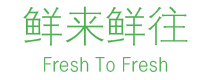
<style>
.page{position:relative;width:200px;height:80px;background:#ffffff}
.page>*{position:absolute;margin:0}
.t1{font:41.7px "FZDX--GB1-4";color:#4caf50}
.t2{font:19.1px "FZDX--GB1-4";color:#4caf50}
</style>
<div class="page">
<p class="t1" style="left:23px;top:6px;width:165px;height:40px">鲜来鲜往</p>
<p class="t2" style="left:44px;top:57px;width:124px;height:15px">Fresh To Fresh</p>
</div>
